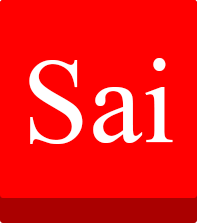
<style>
.page{position:relative;width:197px;height:223px;background:#ff0000}
.page>*{position:absolute;margin:0}
.t1{font:120px "TimesNewRomanPSMT";color:#ffffff}
</style>
<div class="page">
<p class="t1" style="left:29px;top:58px;width:144px;height:86px">Sai</p>
</div>
